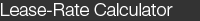
<style>
.page{position:relative;width:200px;height:21px;background:#333333}
.page>*{position:absolute;margin:0}
.t1{font:18px "HelveticaNeueLTPro-Lt";color:#ffffff}
</style>
<div class="page">
<p class="t1" style="left:1px;top:3px;width:172px;height:13px">Lease-Rate Calculator</p>
</div>
